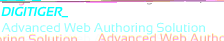
<style>
.page{position:relative;width:224px;height:41px;background:#ffffff}
.page>*{position:absolute;margin:0}
.t1{font:13px "Sansation-Regular"}
.t2{font:13px "Sansation-Bold-Italic"}
</style>
<div class="page">
<p class="t1" style="left:1px;top:6px;width:204px;height:29px"><span class="t2">DIGITIGER_<br></span>Advanced Web Authoring Solution</p>
</div>
